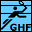
<style>
.page{position:relative;width:32px;height:32px;background:#000000}
.page>*{position:absolute;margin:0}
.t1{font:9.3px "Verdana-Bold";color:#000000}
</style>
<div class="page">
<p class="t1" style="left:10px;top:23px;width:21px;height:8px">GHF</p>
</div>
